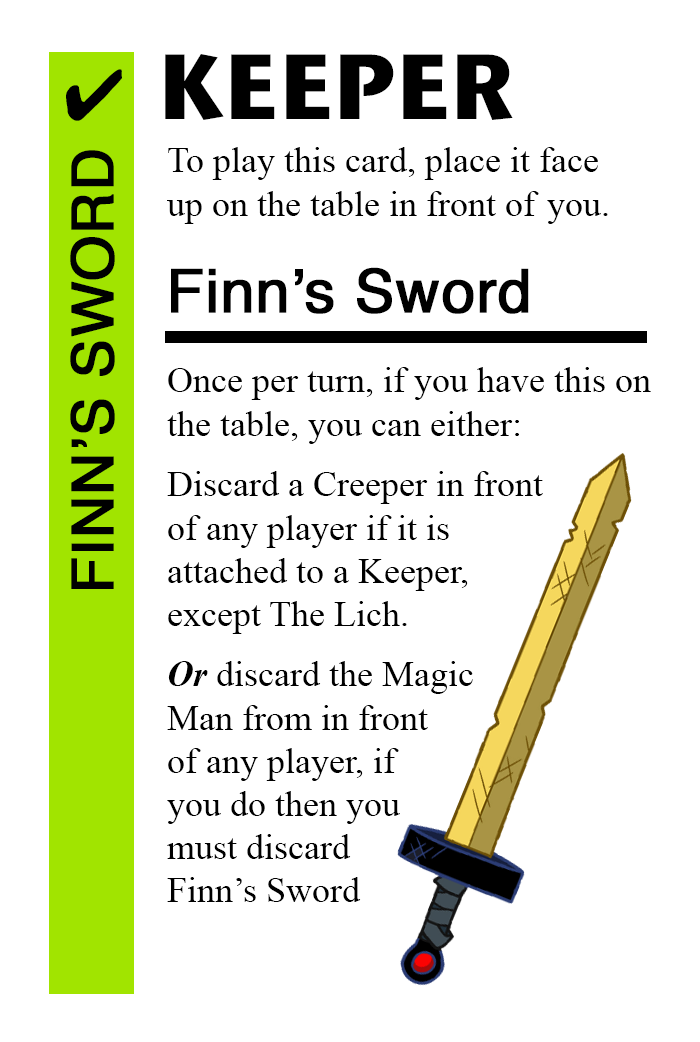
<style>
.page{position:relative;width:700px;height:1042px;background:#ffffff}
.page>*{position:absolute;margin:0}
.t1{font:92px "StoneSansITC-Bold";color:#000000}
.t2{font:72px "MS-Gothic";color:#000000}
.t3{font:58px "Helvetica";color:#000000;font-weight:bold}
.t4{font:36px "TimesNewRomanPSMT";color:#000000}
.t5{font:60px "Helvetica";color:#000000;font-weight:bold}
.t6{font:36px "TimesNewRomanPS-BoldItalicMT";color:#000000}
</style>
<div class="page">
<p class="t1" style="left:165px;top:54px;width:348px;height:66px">KEEPER</p>
<p class="t2" style="left:66px;top:69px;width:56px;height:52px">✔</p>
<p class="t3" style="left:70px;top:150px;width:45px;height:439px;rotate:-90deg">FINN’S SWORD</p>
<p class="t4" style="left:167px;top:147px;width:441px;height:77px">To play this card, place it face<br>up on the table in front of you.</p>
<p class="t5" style="left:171px;top:267px;width:358px;height:47px">Finn’s Sword</p>
<p class="t4" style="left:167px;top:367px;width:484px;height:77px">Once per turn, if you have this on <br>the table, you can either:</p>
<p class="t4" style="left:167px;top:471px;width:376px;height:163px">Discard a Creeper in front <br>of any player if it is <br>attached to a Keeper, <br>except The Lich.</p>
<p class="t4" style="left:167px;top:661px;width:306px;height:241px"><span class="t6">Or</span> discard the Magic <br>Man from in front <br>of any player, if <br>you do then you<br>must discard<br>Finn’s Sword</p>
</div>
